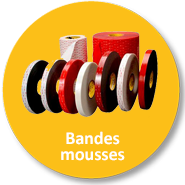
<style>
.page{position:relative;width:185px;height:185px;background:#fcbf18}
.page>*{position:absolute;margin:0}
.t1{font:18px/16px "Calibri-Bold";color:#ffffff}
</style>
<div class="page">
<p class="t1" style="left:61px;top:131px;width:64px;height:30px;text-align:center">Bandes<br>mousses</p>
</div>
